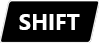
<style>
.page{position:relative;width:99px;height:43px;background:#000000}
.page>*{position:absolute;margin:0}
.t1{font:22px "SegoeUI-Bold";color:#ffffff}
</style>
<div class="page">
<p class="t1" style="left:19px;top:14px;width:61px;height:16px">SHIFT</p>
</div>
